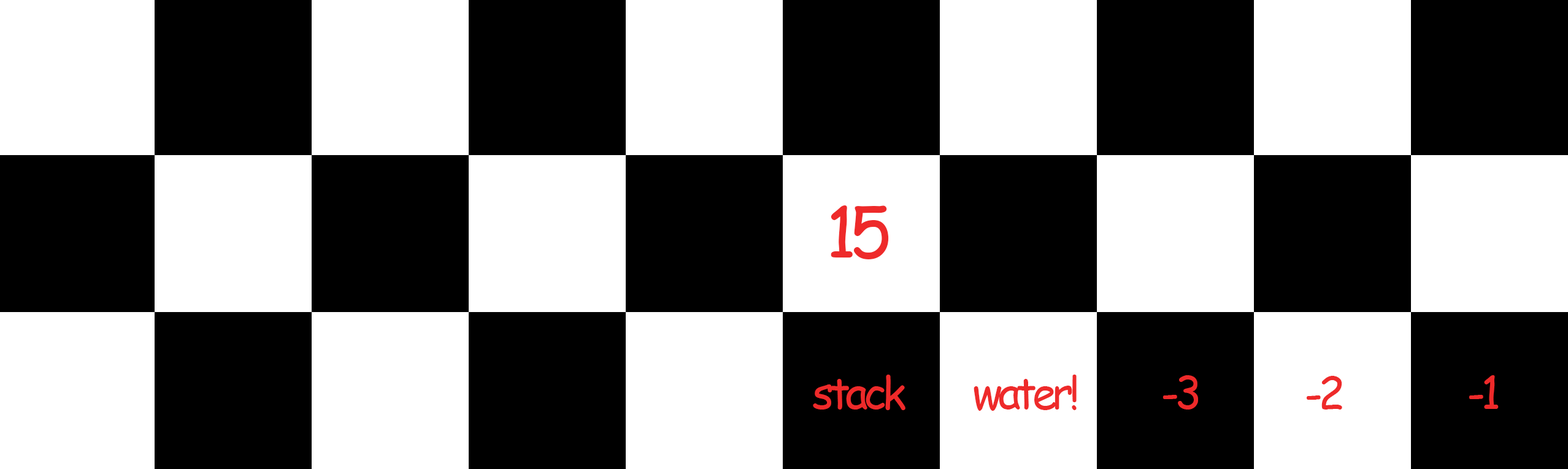
<style>
.page{position:relative;width:1568px;height:469px;background:#000000}
.page>*{position:absolute;margin:0}
.t1{font:68.7px "ComicSansMS";letter-spacing:-0.1em;color:#ee2a2a}
.t2{font:44.2px "ComicSansMS";letter-spacing:-0.1em;color:#ee2a2a}
</style>
<div class="page">
<p class="t1" style="left:831px;top:206px;width:58px;height:53px">15</p>
<p class="t2" style="left:813px;top:375px;width:92px;height:35px">stack</p>
<p class="t2" style="left:974px;top:375px;width:103px;height:36px">water!</p>
<p class="t2" style="left:1163px;top:375px;width:35px;height:35px">-3</p>
<p class="t2" style="left:1306px;top:376px;width:36px;height:34px">-2</p>
<p class="t2" style="left:1469px;top:375px;width:30px;height:34px">-1</p>
</div>
